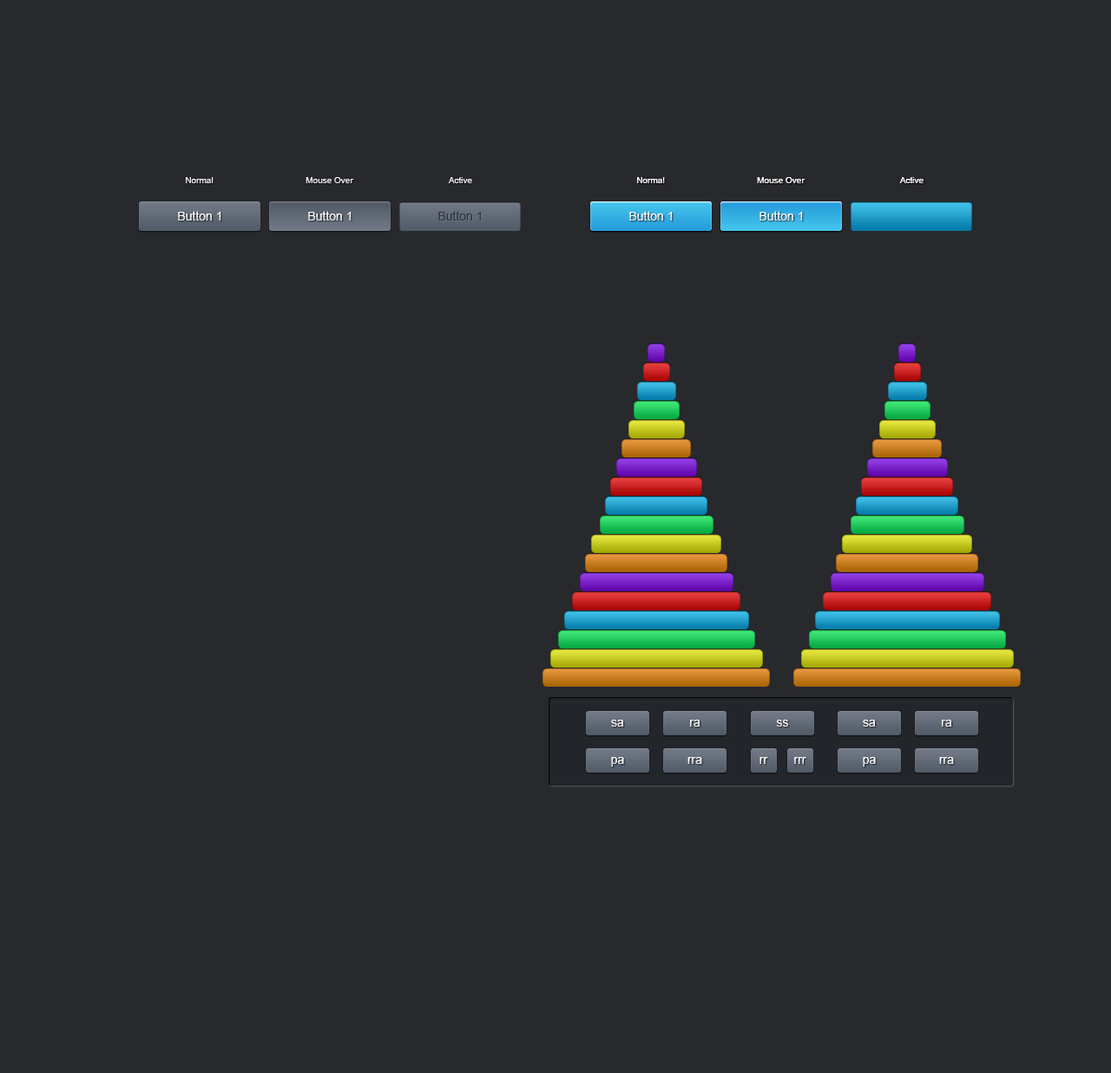
<style>
.page{position:relative;width:1111px;height:1073px;background:#27292d}
.page>*{position:absolute;margin:0}
.t1{font:8.7px "ArialMT";color:#ffffff}
.t2{font:8.7px "ArialMT";color:#ebebeb}
.t3{font:12.2px "ArialMT";color:#ffffff}
.t4{font:12.2px "ArialMT";color:#2c353f}
</style>
<div class="page">
<p class="t1" style="left:186px;top:177px;width:28px;height:6px">Normal</p>
<p class="t1" style="left:306px;top:177px;width:48px;height:6px">Mouse Over</p>
<p class="t2" style="left:448px;top:177px;width:24px;height:6px">Active</p>
<p class="t1" style="left:637px;top:177px;width:28px;height:6px">Normal</p>
<p class="t1" style="left:637px;top:177px;width:28px;height:6px">Normal</p>
<p class="t1" style="left:757px;top:177px;width:49px;height:6px">Mouse Over</p>
<p class="t1" style="left:757px;top:177px;width:49px;height:6px">Mouse Over</p>
<p class="t2" style="left:899px;top:177px;width:25px;height:6px">Active</p>
<p class="t2" style="left:899px;top:177px;width:25px;height:6px">Active</p>
<p class="t3" style="left:178px;top:211px;width:43px;height:10px">Button 1</p>
<p class="t3" style="left:308px;top:211px;width:44px;height:10px">Button 1</p>
<p class="t4" style="left:438px;top:211px;width:44px;height:10px">Button 1</p>
<p class="t3" style="left:629px;top:211px;width:44px;height:10px">Button 1</p>
<p class="t3" style="left:629px;top:211px;width:44px;height:10px">Button 1</p>
<p class="t3" style="left:760px;top:211px;width:43px;height:10px">Button 1</p>
<p class="t3" style="left:760px;top:211px;width:43px;height:10px">Button 1</p>
<p class="t3" style="left:611px;top:720px;width:13px;height:7px">sa</p>
<p class="t3" style="left:690px;top:720px;width:11px;height:7px">ra</p>
<p class="t3" style="left:776px;top:720px;width:13px;height:7px">ss</p>
<p class="t3" style="left:863px;top:720px;width:13px;height:7px">sa</p>
<p class="t3" style="left:942px;top:720px;width:10px;height:7px">ra</p>
<p class="t3" style="left:611px;top:757px;width:13px;height:10px">pa</p>
<p class="t3" style="left:688px;top:757px;width:14px;height:7px">rra</p>
<p class="t3" style="left:760px;top:757px;width:8px;height:7px">rr</p>
<p class="t3" style="left:794px;top:757px;width:13px;height:7px">rrr</p>
<p class="t3" style="left:863px;top:757px;width:13px;height:10px">pa</p>
<p class="t3" style="left:939px;top:757px;width:15px;height:7px">rra</p>
</div>
